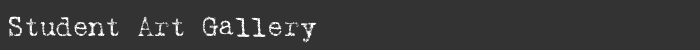
<style>
.page{position:relative;width:700px;height:50px;background:#333333}
.page>*{position:absolute;margin:0}
.t1{font:28px "Harting-Plain";letter-spacing:-0.025em;color:#ffffff}
</style>
<div class="page">
<p class="t1" style="left:9px;top:16px;width:308px;height:27px">Student Art Gallery</p>
</div>
